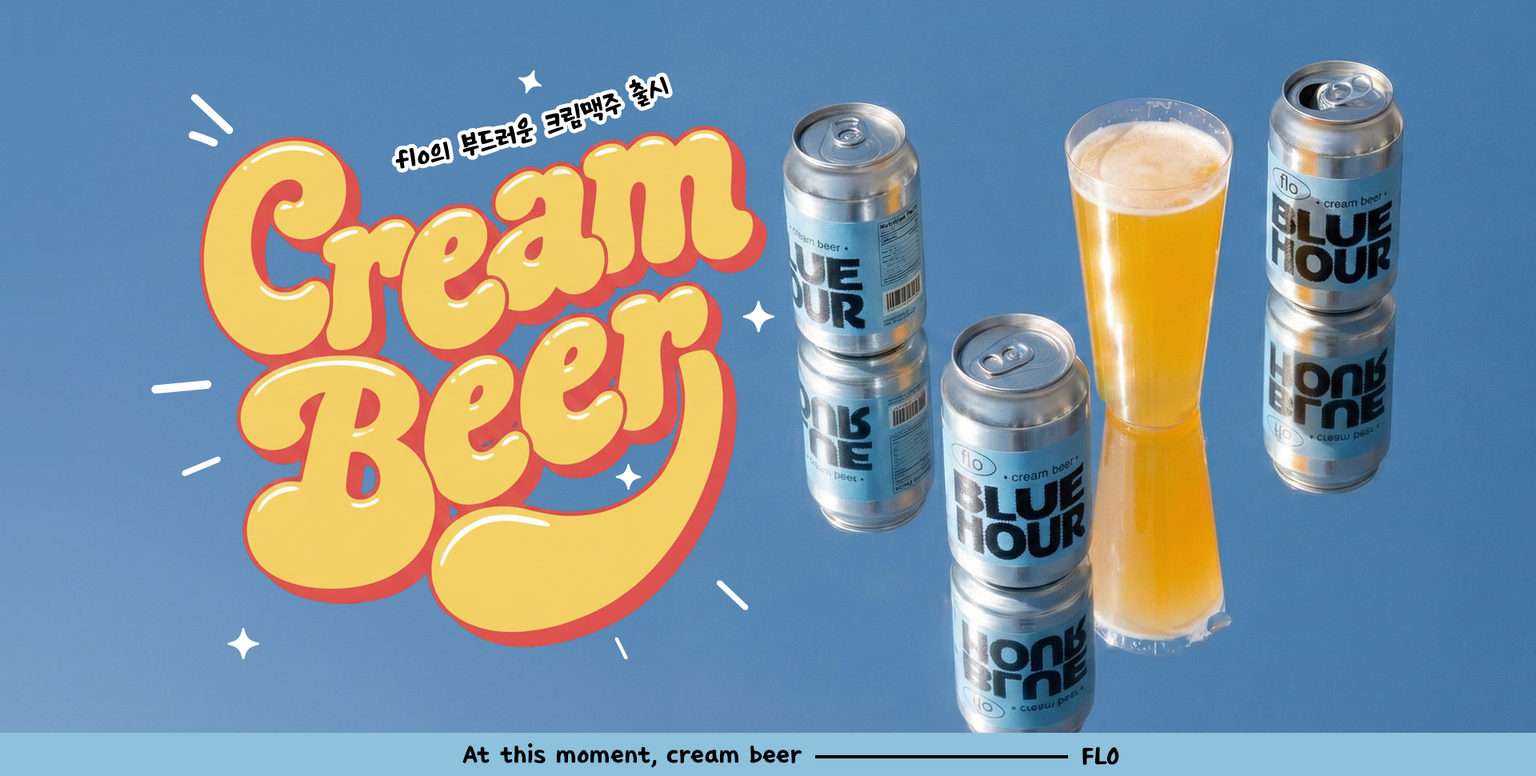
<style>
.page{position:relative;width:1536px;height:776px}
.page>*{position:absolute;margin:0}
.t1{font:25.3px "KCC-Murukmuruk";letter-spacing:0.01em;color:#000000}
.t2{font:24px "KCC-Murukmuruk";letter-spacing:0.01em;color:#000000}
</style>
<div class="page">
<p class="t1" style="left:395px;top:76px;width:274px;height:93px;rotate:-16deg">flo의 부드러운 크림맥주 출시</p>
<p class="t2" style="left:462px;top:743px;width:341px;height:25px">At this moment, cream beer</p>
<p class="t2" style="left:1083px;top:747px;width:36px;height:18px">FLO</p>
</div>
